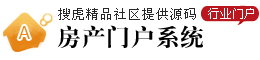
<style>
.page{position:relative;width:260px;height:60px;background:#ffffff}
.page>*{position:absolute;margin:0}
.t1{font:13px "NSimSun";color:#282828}
.t2{font:18px "KhmerUI";color:#e68717}
.t3{font:24px "¾­µä´ÖËÎ¼ò-regular";letter-spacing:0.025em;color:#000000}
</style>
<div class="page">
<p class="t1" style="left:58px;top:8px;width:138px;height:12px">搜虎精品社区提供源码</p>
<p class="t2" style="left:18px;top:26px;width:12px;height:13px">A</p>
<p class="t3" style="left:58px;top:25px;width:145px;height:23px">房产门户系统</p>
</div>
